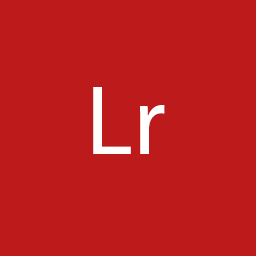
<style>
.page{position:relative;width:256px;height:256px;background:#bd1b1b}
.page>*{position:absolute;margin:0}
.t1{font:100px "MyriadPro-Regular";color:#ffffff}
</style>
<div class="page">
<p class="t1" style="left:93px;top:87px;width:72px;height:67px">Lr</p>
</div>
